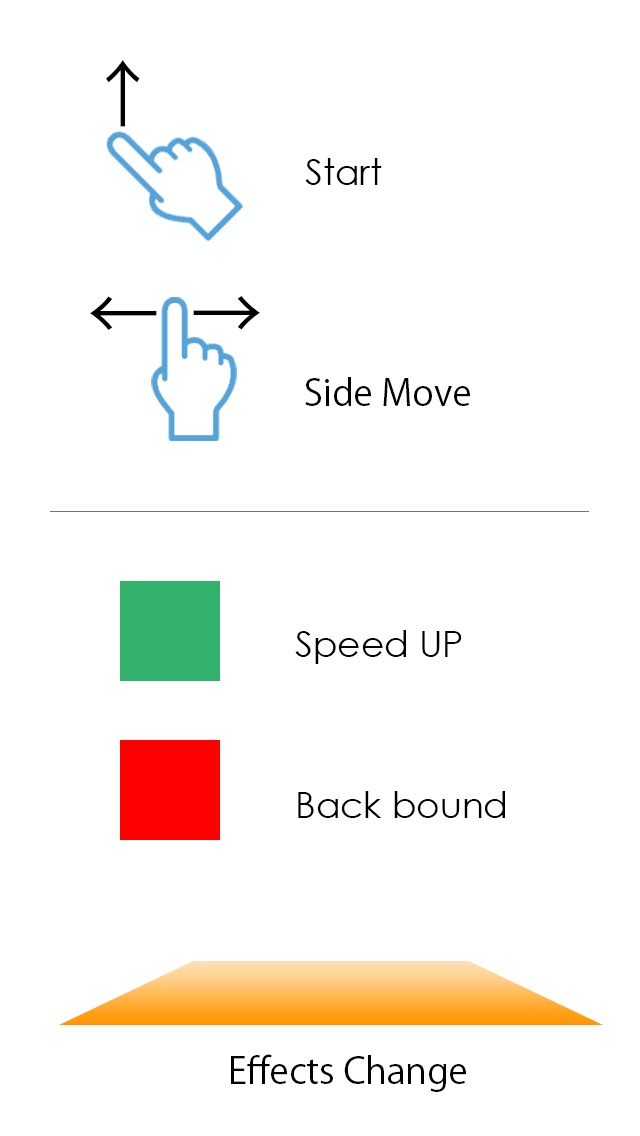
<style>
.page{position:relative;width:640px;height:1136px;background:#ffffff}
.page>*{position:absolute;margin:0}
.t1{font:72px "KozGoPr6N-Regular";color:#000000}
.t2{font:36px "CenturyGothic";color:#000000}
.t3{font:36px "KozGoPr6N-Regular";color:#000000}
</style>
<div class="page">
<p class="t1" style="left:106px;top:60px;width:34px;height:67px">↑</p>
<p class="t2" style="left:305px;top:158px;width:77px;height:27px">Start</p>
<p class="t1" style="left:90px;top:296px;width:67px;height:34px;rotate:-90deg">↑</p>
<p class="t1" style="left:193px;top:296px;width:67px;height:34px;rotate:90deg">↑</p>
<p class="t3" style="left:305px;top:377px;width:165px;height:29px">Side Move</p>
<p class="t2" style="left:295px;top:630px;width:167px;height:34px">Speed UP</p>
<p class="t2" style="left:298px;top:791px;width:207px;height:27px">Back bound</p>
<p class="t3" style="left:231px;top:1054px;width:235px;height:38px">Effects Change</p>
</div>
